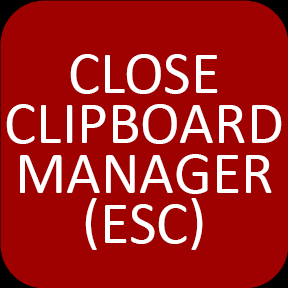
<style>
.page{position:relative;width:288px;height:288px;background:#9f0000}
.page>*{position:absolute;margin:0}
.t1{font:60px/50px "Calibri";color:#ffffff;text-transform:uppercase}
</style>
<div class="page">
<p class="t1" style="left:6px;top:54px;width:276px;height:196px;text-align:center">CLOSE<br>CLIPBOARD<br>MANAGER<br>(ESC)</p>
</div>
